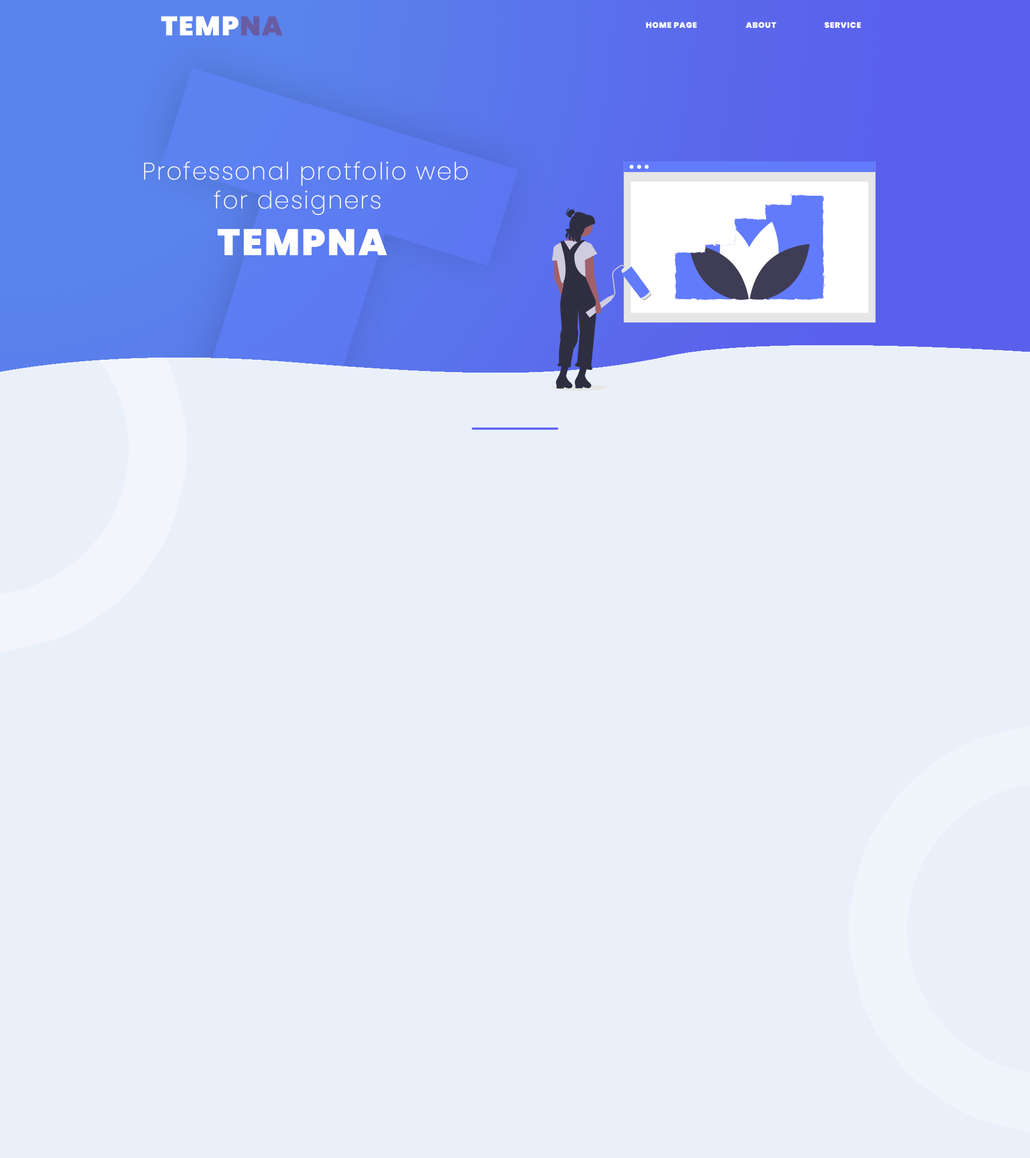
<style>
.page{position:relative;width:1030px;height:1158px;background:#eaf0fa}
.page>*{position:absolute;margin:0}
.t1{font:26.8px "Poppins-Black";letter-spacing:0.04em;color:#ffffff}
.t2{font:26.8px "Poppins-Black";letter-spacing:0.04em;color:#685ca3}
.t3{font:8px "Poppins-Black";letter-spacing:0.05em;color:#ffffff}
.t4{font:24.1px/29px "Poppins-ExtraLight";letter-spacing:0.05em;color:#ffffff}
.t5{font:37px "Poppins-Black";letter-spacing:0.05em;color:#ffffff}
</style>
<div class="page">
<p class="t1" style="left:161px;top:16px;width:122px;height:19px">TEMP<span class="t2">NA</span></p>
<p class="t3" style="left:646px;top:22px;width:51px;height:6px">HOME PAGE</p>
<p class="t3" style="left:745px;top:22px;width:31px;height:6px">ABOUT</p>
<p class="t3" style="left:824px;top:22px;width:37px;height:6px">SERVICE</p>
<p class="t4" style="left:144px;top:161px;width:324px;height:54px;text-align:center">Professonal protfolio web<br>for designers</p>
<p class="t5" style="left:217px;top:229px;width:170px;height:26px">TEMPNA</p>
</div>
